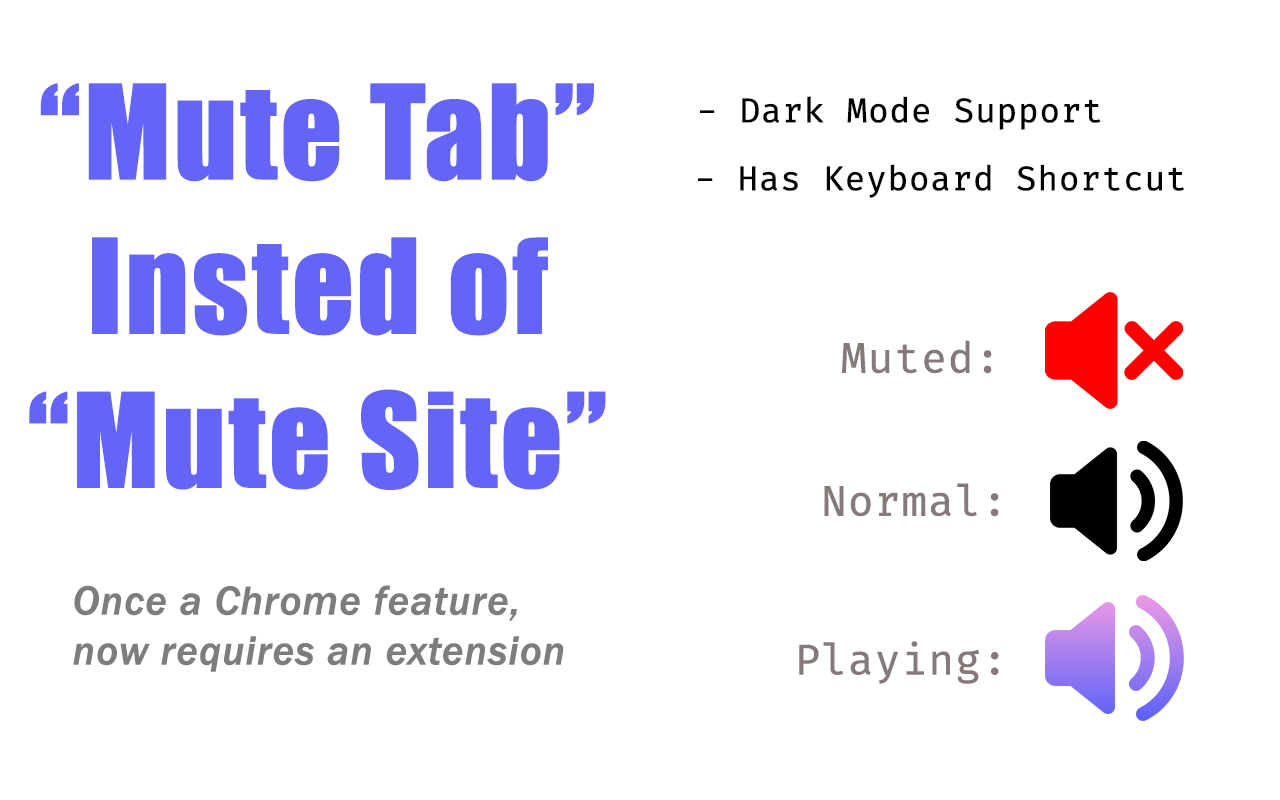
<style>
.page{position:relative;width:1280px;height:800px;background:#ffffff}
.page>*{position:absolute;margin:0}
.t1{font:120.8px/154.2px "Impact";color:#6465f7;font-weight:bold}
.t2{font:33.3px "FiraCode-Regular";color:#020202;font-weight:bold}
.t3{font:41.7px "FiraCode-Regular";color:#857979;font-weight:bold}
.t4{font:41.7px/50px "FranklinGothic-MediumItalic";color:#7d7d7d;font-weight:bold}
</style>
<div class="page">
<p class="t1" style="left:29px;top:83px;width:577px;height:407px;text-align:center">“Mute Tab”<br>Insted of<br>“Mute Site”</p>
<p class="t2" style="left:700px;top:96px;width:401px;height:34px">- Dark Mode Support</p>
<p class="t2" style="left:698px;top:164px;width:486px;height:34px">- Has Keyboard Shortcut</p>
<p class="t3" style="left:842px;top:340px;width:150px;height:34px">Muted:</p>
<p class="t3" style="left:824px;top:483px;width:175px;height:34px">Normal:</p>
<p class="t4" style="left:73px;top:585px;width:491px;height:87px">Once a Chrome feature,<br>now requires an extension</p>
<p class="t3" style="left:799px;top:641px;width:200px;height:43px">Playing:</p>
</div>
